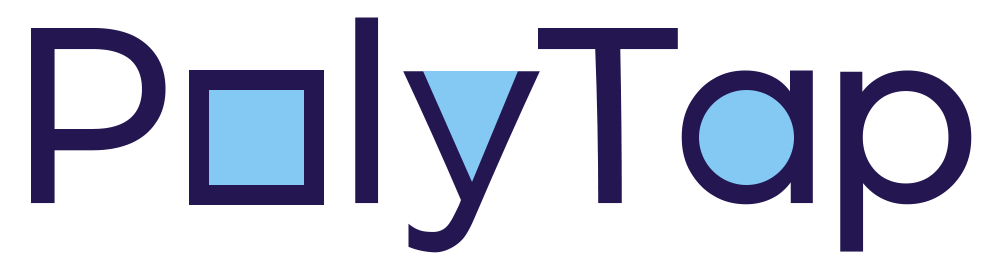
<style>
.page{position:relative;width:1000px;height:270px;background:#ffffff}
.page>*{position:absolute;margin:0}
.t1{font:250px "Minimasimple-bold";color:#231651}
</style>
<div class="page">
<p class="t1" style="left:31px;top:17px;width:941px;height:236px">PolyTap</p>
</div>
